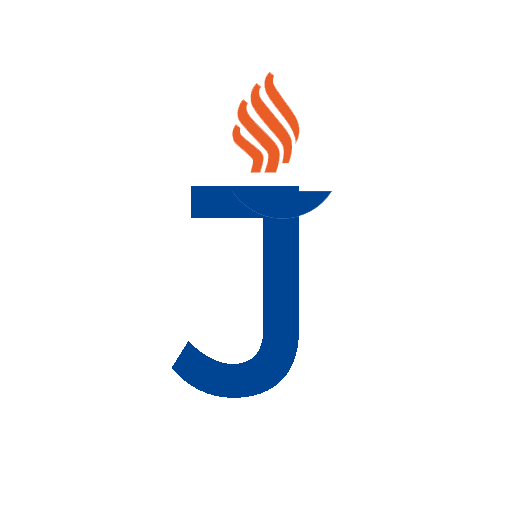
<style>
.page{position:relative;width:512px;height:512px;background:#ffffff}
.page>*{position:absolute;margin:0}
.t1{font:300px "Montserrat-Regular";color:#004494}
</style>
<div class="page">
<p class="t1" style="left:172px;top:186px;width:127px;height:212px">J</p>
</div>
